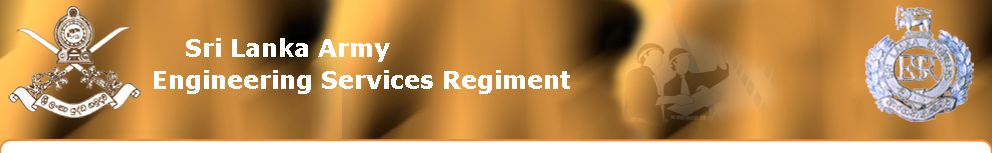
<style>
.page{position:relative;width:992px;height:153px}
.page>*{position:absolute;margin:0}
.t1{font:24px "Verdana-Bold";color:#ffffff}
</style>
<div class="page">
<p class="t1" style="left:186px;top:38px;width:204px;height:24px">Sri Lanka Army</p>
<p class="t1" style="left:154px;top:70px;width:416px;height:24px">Engineering Services Regiment</p>
</div>
